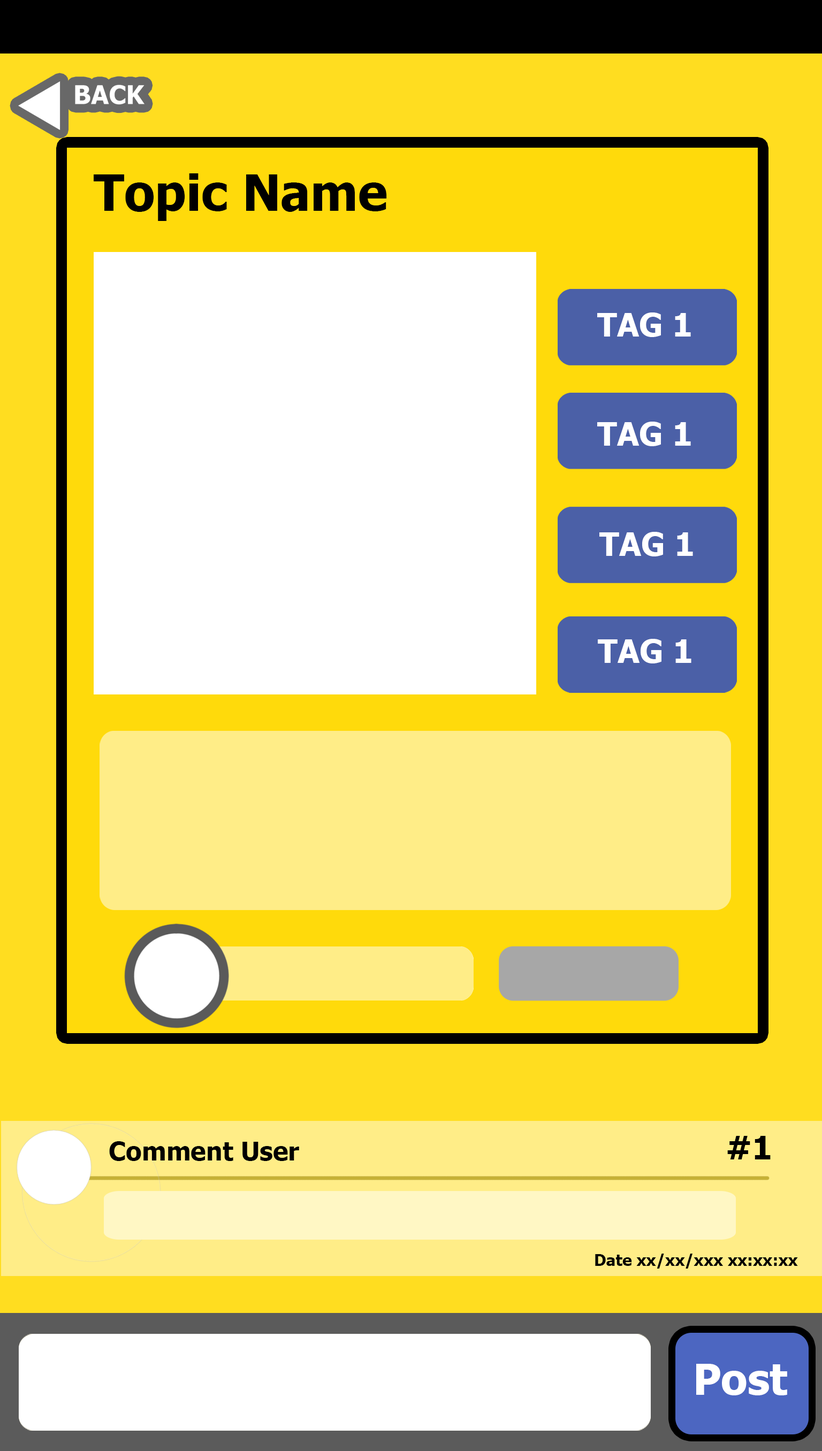
<style>
.page{position:relative;width:822px;height:1451px;background:#ffffff}
.page>*{position:absolute;margin:0}
.t1{font:49.8px "Tahoma-Bold";color:#000000}
.t2{font:32.1px "Tahoma-Bold";color:#ffffff}
.t3{font:25.7px "Tahoma-Bold";color:#000000}
.t4{font:32.1px "Tahoma-Bold";color:#000000}
.t5{font:16.1px "Tahoma-Bold";color:#000000}
.t6{font:42.8px "Tahoma-Bold";color:#ffffff}
</style>
<div class="page">
<p class="t1" style="left:94px;top:173px;width:293px;height:48px">Topic Name</p>
<p class="t2" style="left:597px;top:312px;width:94px;height:25px">TAG 1</p>
<p class="t2" style="left:597px;top:422px;width:94px;height:24px">TAG 1</p>
<p class="t2" style="left:599px;top:532px;width:94px;height:24px">TAG 1</p>
<p class="t2" style="left:598px;top:639px;width:93px;height:24px">TAG 1</p>
<p class="t3" style="left:109px;top:1141px;width:190px;height:20px">Comment User</p>
<p class="t4" style="left:727px;top:1136px;width:43px;height:23px">#1</p>
<p class="t5" style="left:595px;top:1254px;width:203px;height:15px">Date xx/xx/xxx xx:xx:xx</p>
<p class="t6" style="left:696px;top:1364px;width:91px;height:31px">Post</p>
</div>
